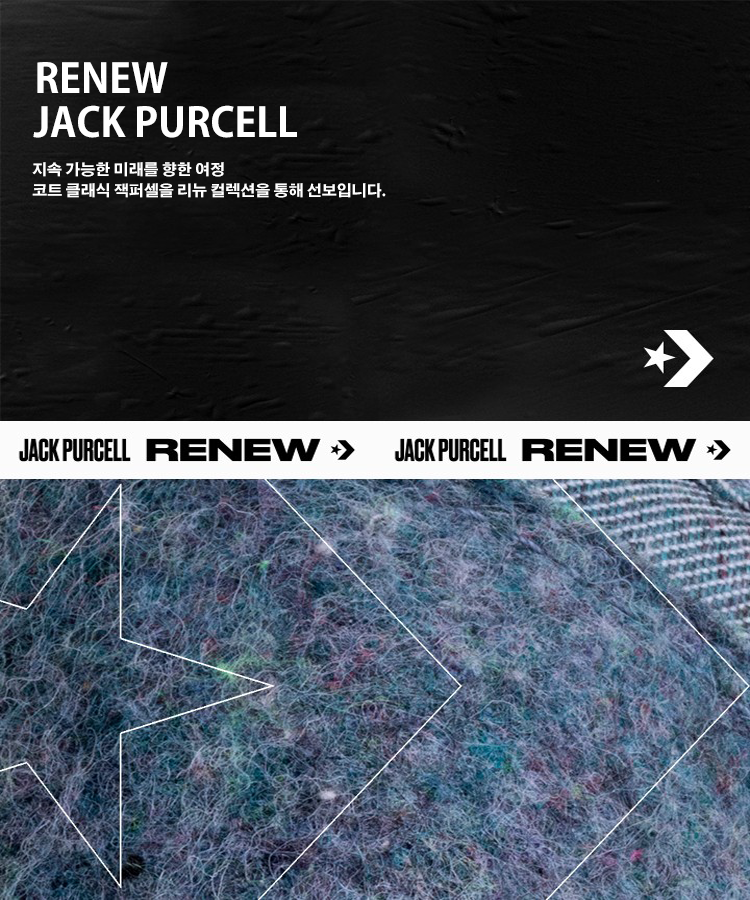
<style>
.page{position:relative;width:750px;height:900px}
.page>*{position:absolute;margin:0}
.t1{font:40px "AdobeGothicStd-Bold";color:#ffffff}
.t2{font:15px "AdobeGothicStd-Bold";color:#ffffff}
</style>
<div class="page">
<p class="t1" style="left:37px;top:62px;width:131px;height:31px">RENEW</p>
<p class="t1" style="left:33px;top:105px;width:264px;height:33px">JACK PURCELL</p>
<p class="t2" style="left:32px;top:162px;width:192px;height:15px">지속 가능한 미래를 향한 여정</p>
<p class="t2" style="left:32px;top:183px;width:354px;height:15px">코트 클래식 잭퍼셀을 리뉴 컬렉션을 통해 선보입니다.</p>
</div>
